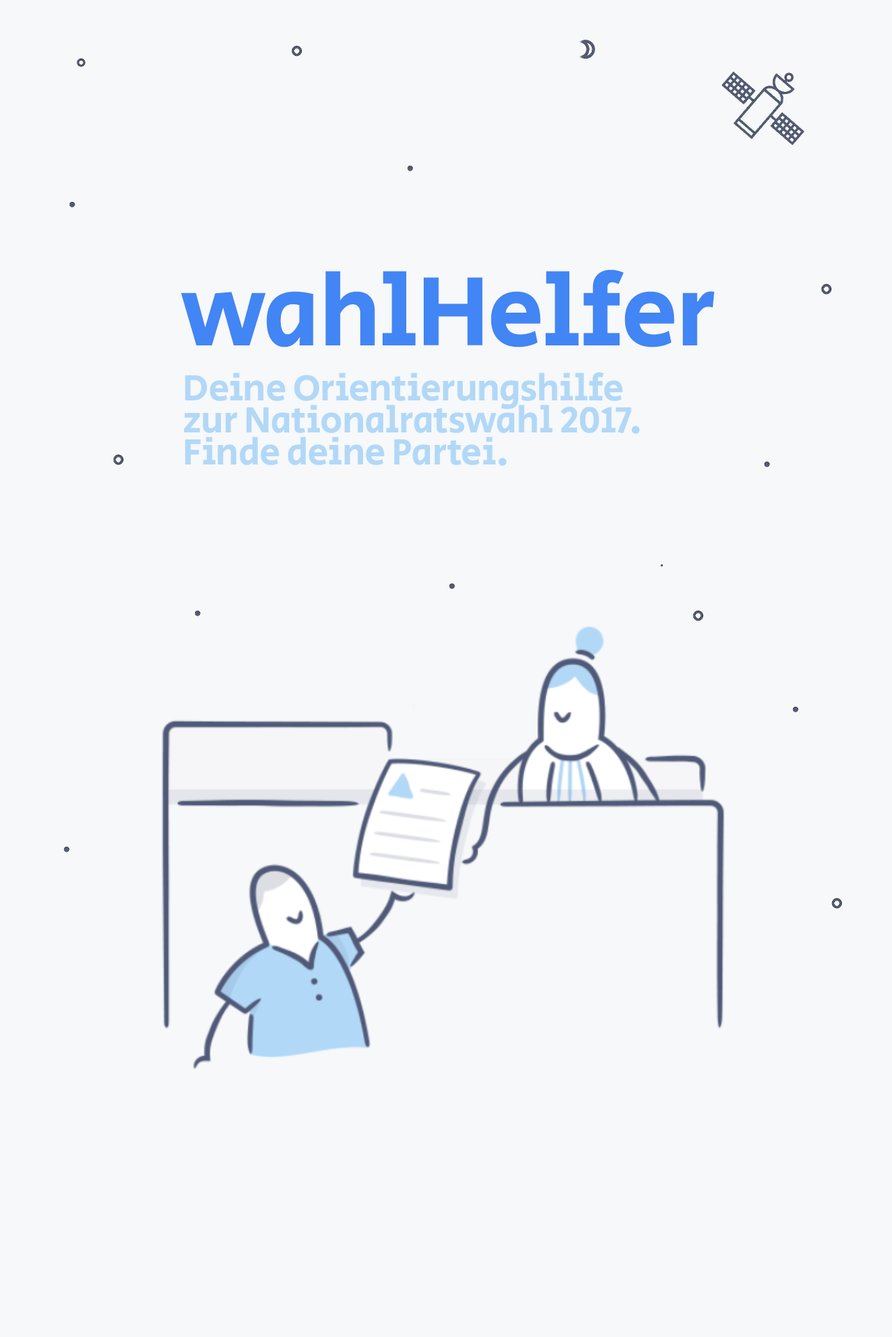
<style>
.page{position:relative;width:892px;height:1337px;background:#f6f8fa}
.page>*{position:absolute;margin:0}
.t1{font:101.6px "SecularOne-Regular";letter-spacing:-0.02em;color:#4285f4}
.t2{font:37.7px/32px "SecularOne-Regular";letter-spacing:-0.02em;color:#b2d8f7}
</style>
<div class="page">
<p class="t1" style="left:181px;top:270px;width:533px;height:78px">wahlHelfer</p>
<p class="t2" style="left:184px;top:372px;width:455px;height:94px">Deine Orientierungshilfe<br>zur Nationalratswahl 2017.<br>Finde deine Partei.</p>
</div>
